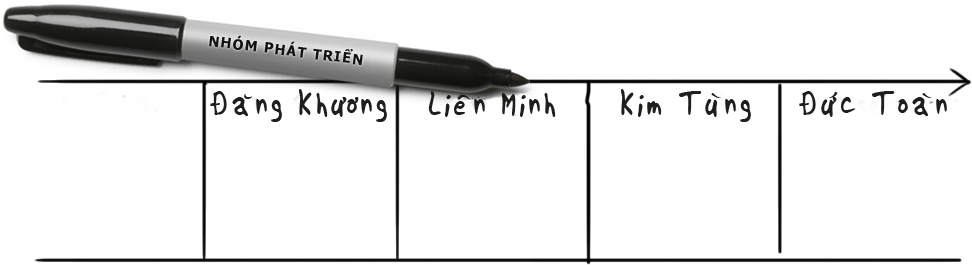
<style>
.page{position:relative;width:972px;height:265px;background:#ffffff}
.page>*{position:absolute;margin:0}
.t1{font:14px "Tahoma-Bold";letter-spacing:0.1em;color:#111310}
.t2{font:36px "VNI-Viettay-Normal";letter-spacing:0.1em;color:#111310}
</style>
<div class="page">
<p class="t1" style="left:209px;top:35px;width:154px;height:31px;rotate:7deg">NHÓM PHÁT TRIỂN</p>
<p class="t2" style="left:210px;top:89px;width:177px;height:33px;opacity:0.95">Ñaêng Khöông</p>
<p class="t2" style="left:621px;top:89px;width:130px;height:33px;opacity:0.95">Kim Tuøng</p>
<p class="t2" style="left:428px;top:91px;width:128px;height:26px;opacity:0.95">Lieân Minh</p>
<p class="t2" style="left:799px;top:91px;width:148px;height:26px;opacity:0.95">Ñöùc Toaøn</p>
</div>
